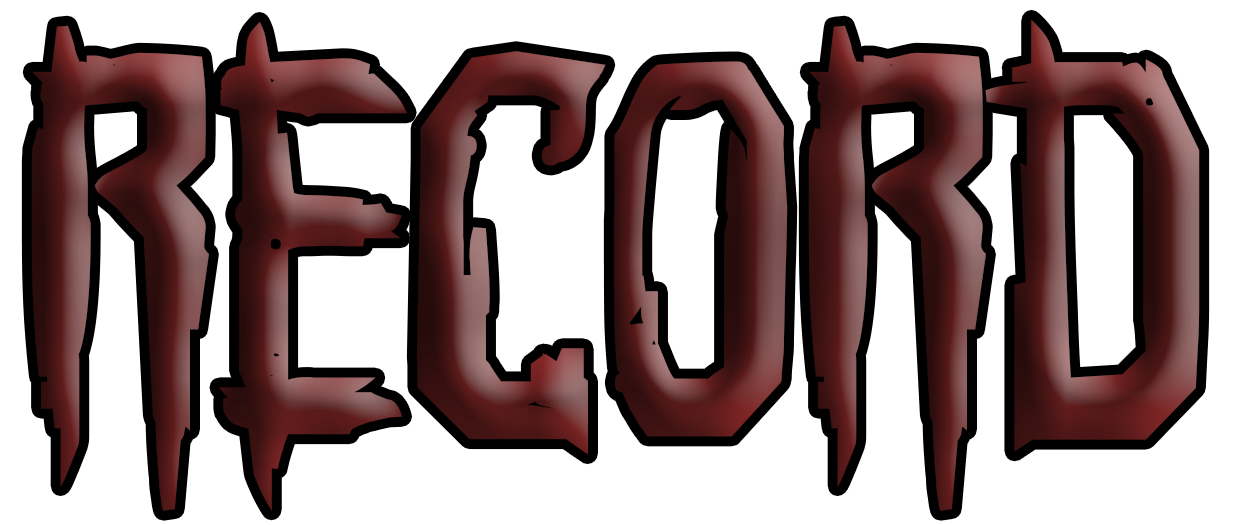
<style>
.page{position:relative;width:1240px;height:525px;background:#ffffff}
.page>*{position:absolute;margin:0}
.t1{font:542.5px "HorroroidBold"}
</style>
<div class="page">
<p class="t1" style="left:31px;top:19px;width:1169px;height:492px">RECORD</p>
</div>
